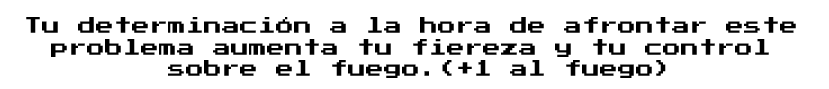
<style>
.page{position:relative;width:829px;height:89px;background:#ffffff}
.page>*{position:absolute;margin:0}
.t1{font:18px "PressStart2P";color:#000000}
</style>
<div class="page">
<p class="t1" style="left:26px;top:17px;width:770px;height:61px;text-align:center">Tu determinación a la hora de afrontar este <br>problema aumenta tu fiereza y tu control <br>sobre el fuego.(+1 al fuego)</p>
</div>
